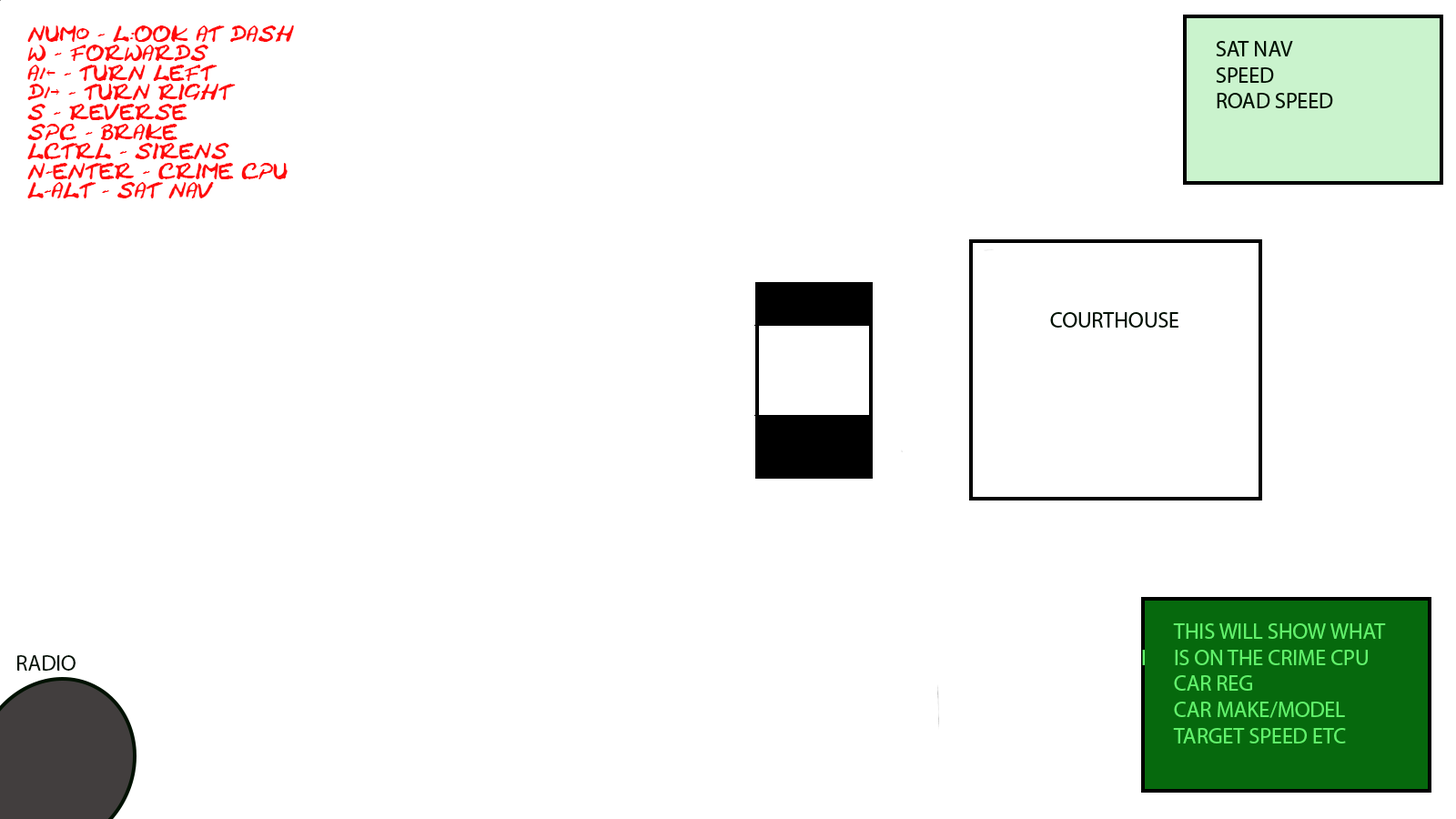
<style>
.page{position:relative;width:1456px;height:819px;background:#ffffff}
.page>*{position:absolute;margin:0}
.t1{font:16.4px "CrackedJohnnie";color:#ff0c0c}
.t2{font:16.4px "LucidaConsole";color:#ff0c0c}
.t3{font:21.8px "MyriadPro-Regular";color:#61f26b}
.t4{font:21.8px "MyriadPro-Regular";color:#011102}
</style>
<div class="page">
<p class="t1" style="left:27px;top:25px;width:267px;height:173px">NUM0 - L:OOK AT DASH<br>W - FORWARDS<br>A/<span class="t2">←</span> - TURN LEFT<br>D/<span class="t2">→</span> - TURN RIGHT<br>S - REVERSE<br>SPC - BRAKE<br>LCTRL - SIRENS<br>N-ENTER - CRIME CPU<br>L-ALT - SAT NAV</p>
<p class="t3" style="left:1142px;top:623px;width:244px;height:120px">THIS WILL SHOW WHAT<br>I IS ON THE CRIME CPU<br> CAR REG<br> CAR MAKE/MODEL<br> TARGET SPEED ETC</p>
<p class="t4" style="left:17px;top:655px;width:59px;height:16px">RADIO</p>
</div>
